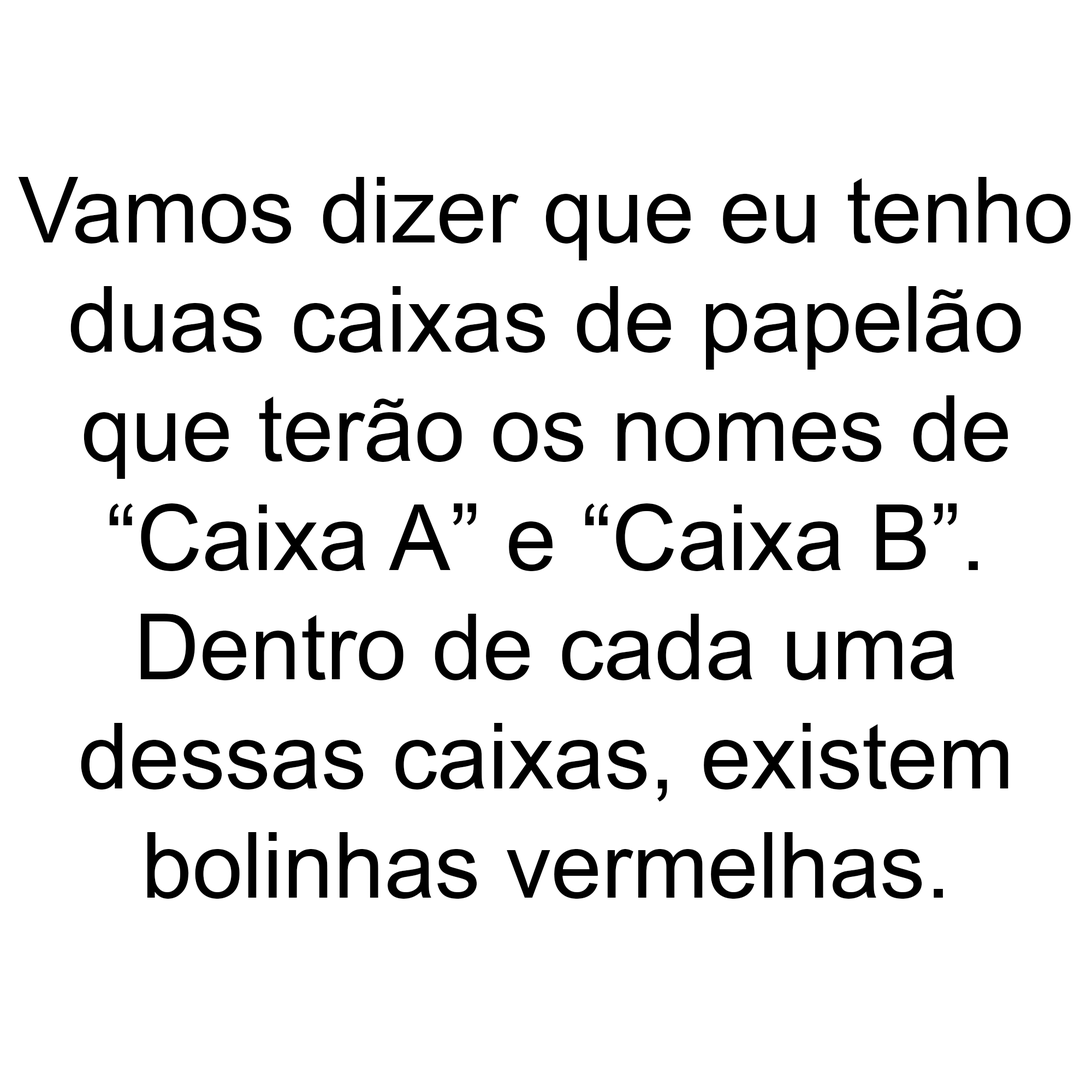
<style>
.page{position:relative;width:1092px;height:1092px;background:#ffffff}
.page>*{position:absolute;margin:0}
.t1{font:91px "ArialMT";color:#000000}
</style>
<div class="page">
<p class="t1" style="left:18px;top:177px;width:1053px;height:722px;text-align:center">Vamos dizer que eu tenho<br>duas caixas de papelão<br>que terão os nomes de<br>“Caixa A” e “Caixa B”.<br>Dentro de cada uma<br>dessas caixas, existem<br>bolinhas vermelhas.</p>
</div>
